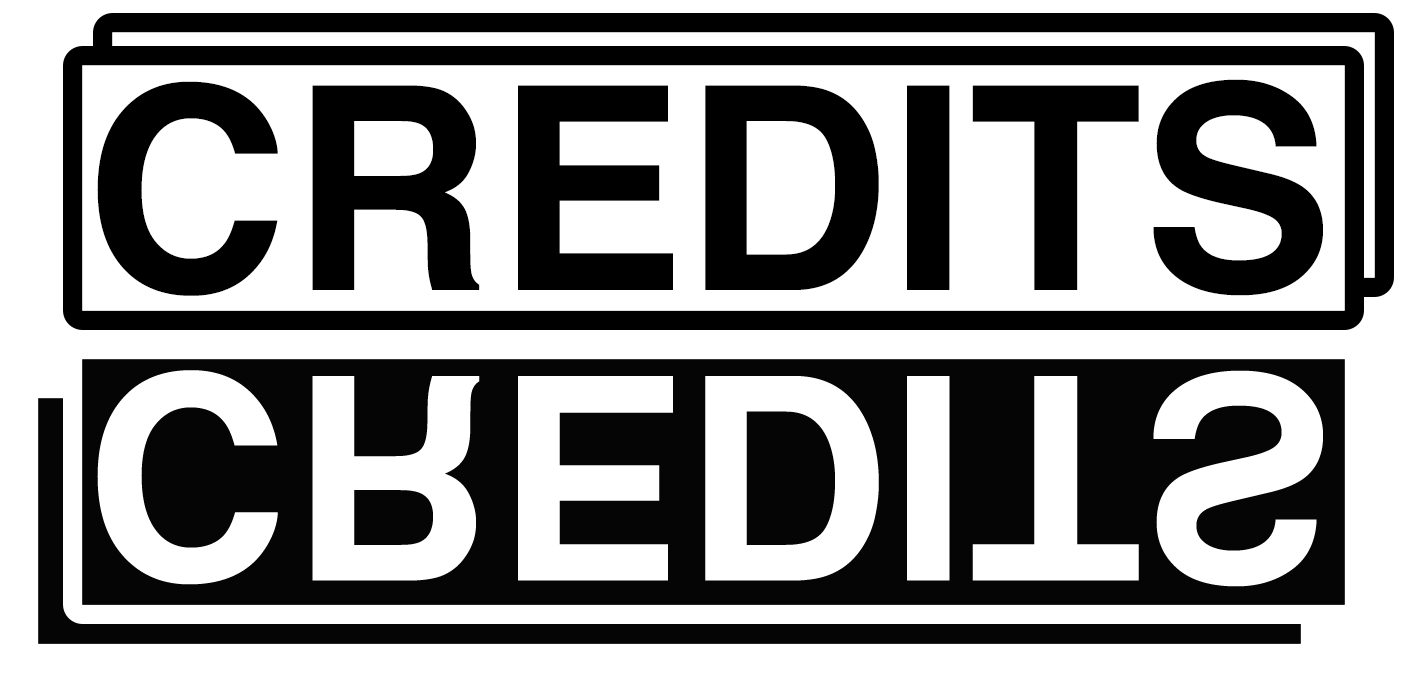
<style>
.page{position:relative;width:1404px;height:687px;background:#ffffff}
.page>*{position:absolute;margin:0}
.t1{font:284px "Helvetica-Bold";color:#000000}
</style>
<div class="page">
<p class="t1" style="left:97px;top:79px;width:1226px;height:217px">CREDITS</p>
</div>
